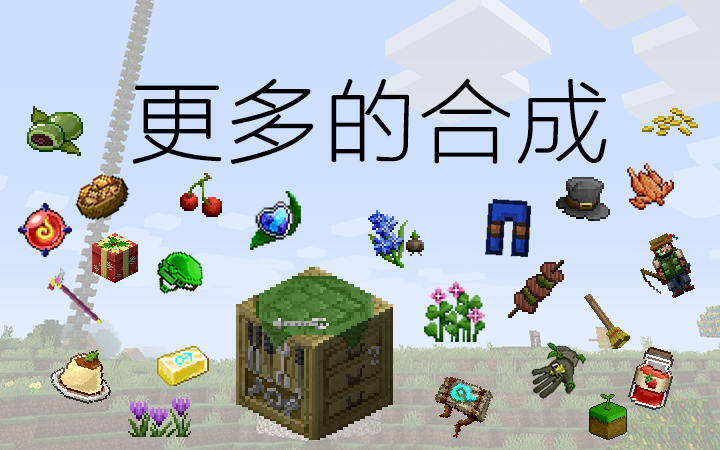
<style>
.page{position:relative;width:720px;height:450px}
.page>*{position:absolute;margin:0}
.t1{font:90.9px "FZLTCXHJW--GB1-0";color:#000000;font-weight:bold;scale:1.03 1}
</style>
<div class="page">
<p class="t1" style="left:132px;top:78px;width:475px;height:86px">更多的合成</p>
</div>
